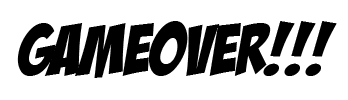
<style>
.page{position:relative;width:348px;height:100px;background:#ffffff}
.page>*{position:absolute;margin:0}
.t1{font:70.6px "BadaBoomBB";color:#000000}
</style>
<div class="page">
<p class="t1" style="left:17px;top:21px;width:320px;height:57px">!!!GameOver</p>
</div>
